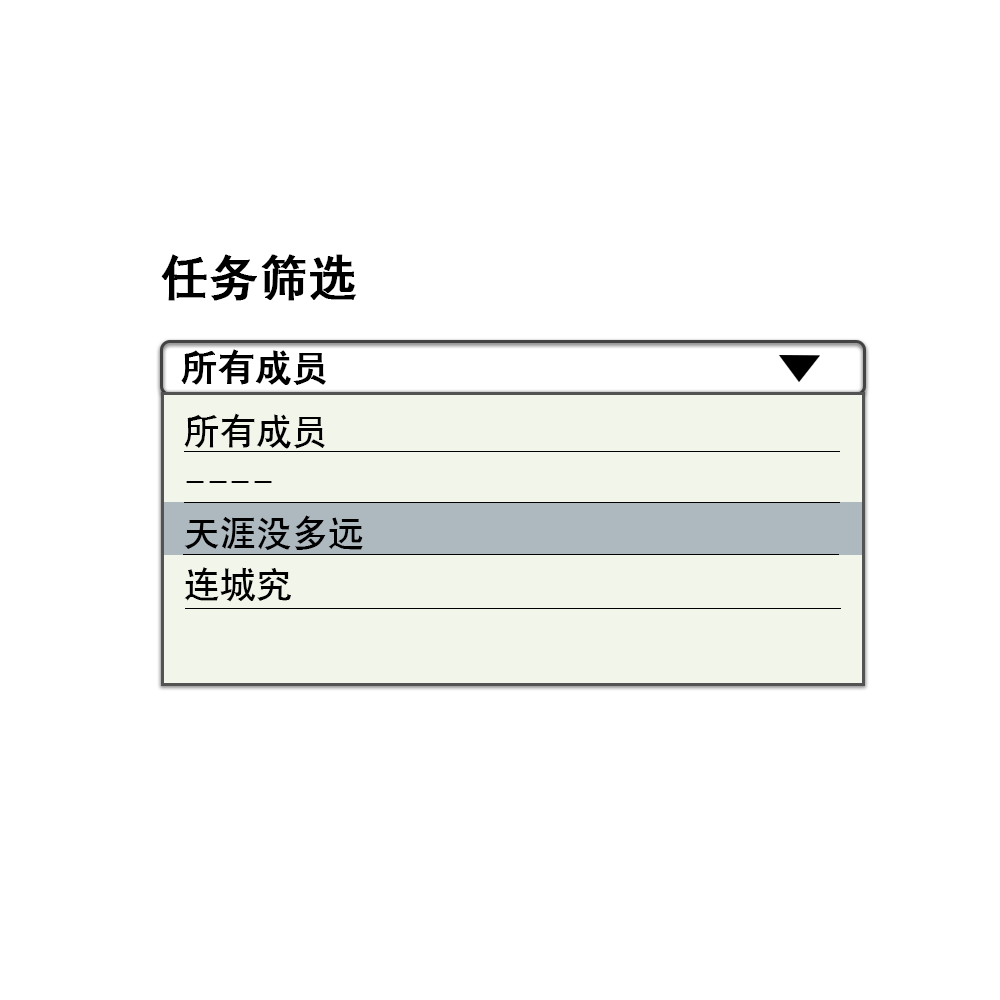
<style>
.page{position:relative;width:1000px;height:1000px;background:#ffffff}
.page>*{position:absolute;margin:0}
.t1{font:48px "ç»å¸é»ä½ç®-regular";color:#000000;font-weight:bold}
.t2{font:36px "ç»å¸é»ä½ç®-regular";color:#000000;font-weight:bold}
.t3{font:36px/51px "ç»å¸é»ä½ç®-regular";color:#000000}
</style>
<div class="page">
<p class="t1" style="left:161px;top:254px;width:196px;height:47px">任务筛选</p>
<p class="t2" style="left:181px;top:349px;width:145px;height:36px">所有成员</p>
<p class="t3" style="left:184px;top:413px;width:179px;height:189px">所有成员<br>----<br>天涯没多远<br>连城究</p>
</div>
